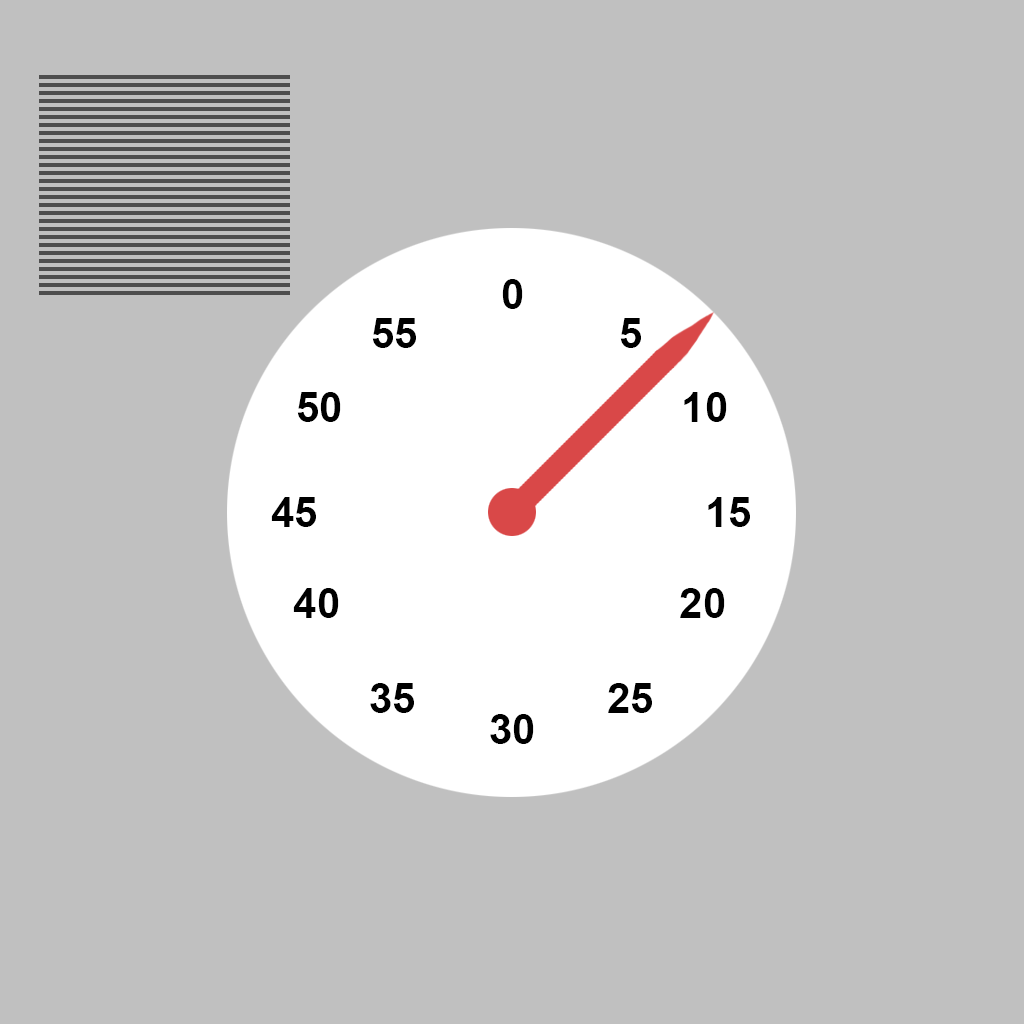
<style>
.page{position:relative;width:1024px;height:1024px;background:#c0c0c0}
.page>*{position:absolute;margin:0}
.t1{font:41.7px "Arial-BoldMT";color:#000000}
</style>
<div class="page">
<p class="t1" style="left:502px;top:279px;width:21px;height:30px">0</p>
<p class="t1" style="left:372px;top:318px;width:44px;height:30px">55</p>
<p class="t1" style="left:620px;top:318px;width:21px;height:30px">5</p>
<p class="t1" style="left:297px;top:392px;width:44px;height:30px">50</p>
<p class="t1" style="left:684px;top:392px;width:43px;height:30px">10</p>
<p class="t1" style="left:271px;top:497px;width:45px;height:30px">45</p>
<p class="t1" style="left:708px;top:497px;width:42px;height:30px">15</p>
<p class="t1" style="left:293px;top:588px;width:46px;height:30px">40</p>
<p class="t1" style="left:680px;top:588px;width:45px;height:30px">20</p>
<p class="t1" style="left:370px;top:683px;width:44px;height:30px">35</p>
<p class="t1" style="left:608px;top:683px;width:44px;height:30px">25</p>
<p class="t1" style="left:490px;top:714px;width:44px;height:30px">30</p>
</div>
